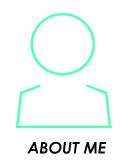
<style>
.page{position:relative;width:132px;height:167px;background:#ffffff}
.page>*{position:absolute;margin:0}
.t1{font:16px "CenturyGothic-BoldItalic";color:#0a0808}
</style>
<div class="page">
<p class="t1" style="left:27px;top:141px;width:79px;height:13px">ABOUT ME</p>
</div>
